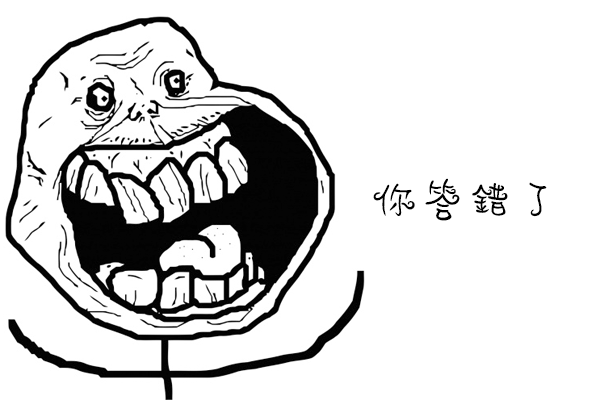
<style>
.page{position:relative;width:600px;height:400px;background:#ffffff}
.page>*{position:absolute;margin:0}
.t1{font:48px "DFMo-W4-WINP-BF";color:#000000}
</style>
<div class="page">
<p class="t1" style="left:373px;top:178px;width:174px;height:43px">你答錯了</p>
</div>
